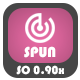
<style>
.page{position:relative;width:80px;height:80px;background:#464646}
.page>*{position:absolute;margin:0}
.t1{font:15px "Bauhaus93";color:#ffffff}
.t2{font:12px "Bauhaus93";color:#ffffff}
</style>
<div class="page">
<p class="t1" style="left:24px;top:46px;width:32px;height:12px">SPUN</p>
<p class="t2" style="left:16px;top:65px;width:48px;height:10px">SO 0.90x</p>
</div>
